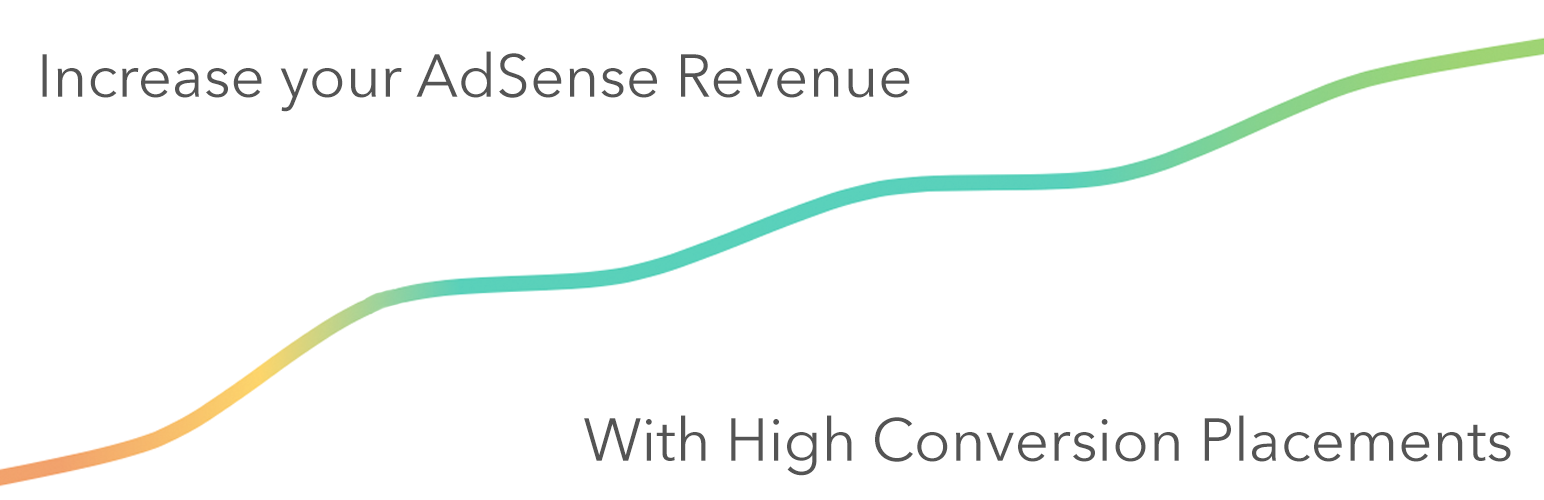
<style>
.page{position:relative;width:1544px;height:500px;background:#ffffff}
.page>*{position:absolute;margin:0}
.t1{font:60px "AvenirNext-Regular";color:#545454}
</style>
<div class="page">
<p class="t1" style="left:42px;top:51px;width:868px;height:61px">Increase your AdSense Revenue</p>
<p class="t1" style="left:584px;top:415px;width:927px;height:61px">With High Conversion Placements</p>
</div>
